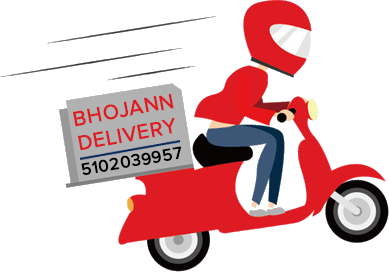
<style>
.page{position:relative;width:389px;height:272px;background:#ffffff}
.page>*{position:absolute;margin:0}
.t1{font:20.9px "ProximaNova-Regular";letter-spacing:0.02em;color:#de1b23;text-transform:uppercase;font-weight:bold}
.t2{font:16.9px "ProximaNova-Regular";letter-spacing:0.02em;color:#000000;text-transform:uppercase;font-weight:bold}
</style>
<div class="page">
<p class="t1" style="left:73px;top:94px;width:102px;height:57px;rotate:-11deg">BHOJANN<br>DELIVERY</p>
<p class="t2" style="left:81px;top:146px;width:100px;height:29px;rotate:-9deg">5102039957</p>
</div>
